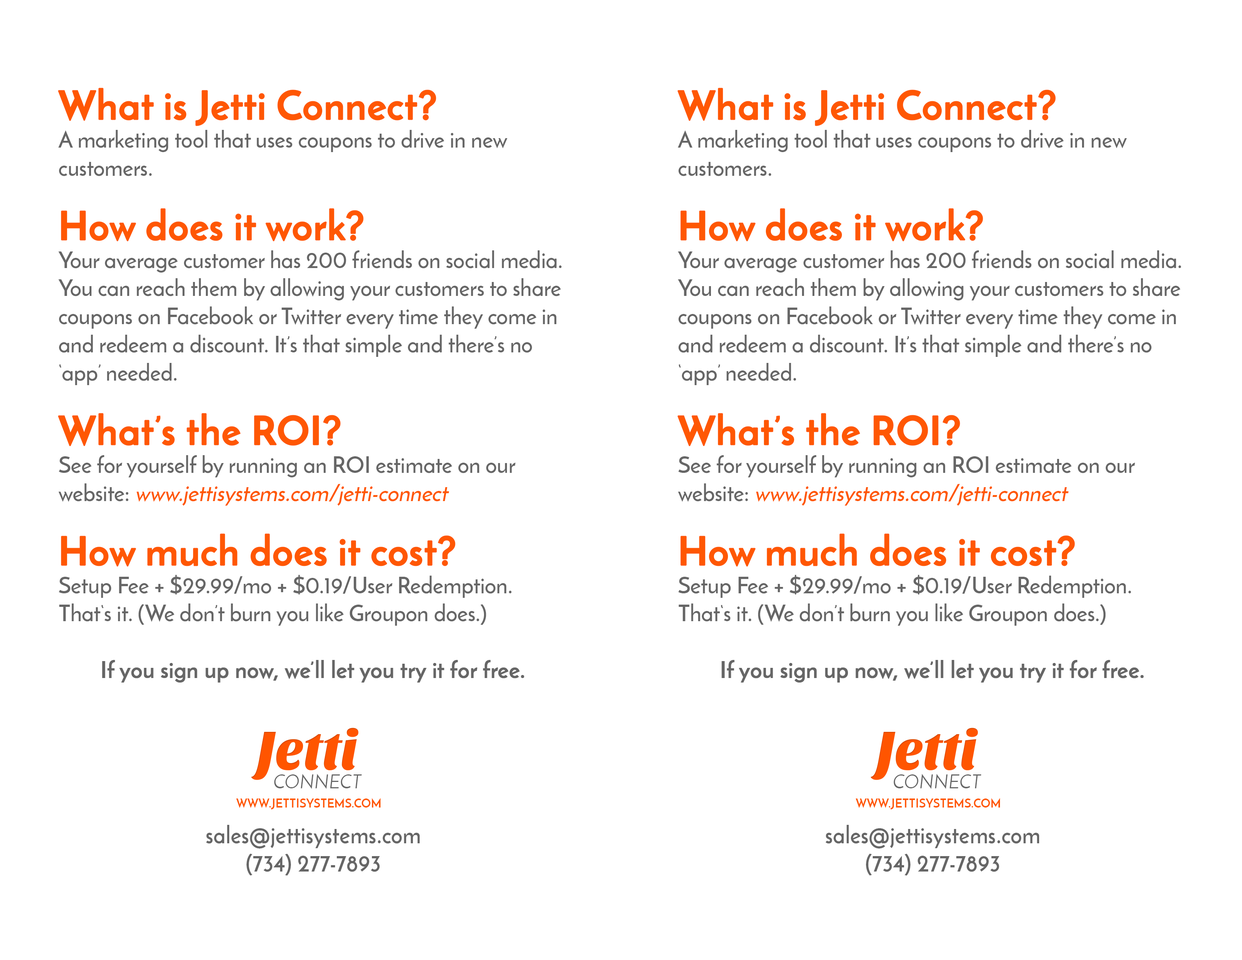
<style>
.page{position:relative;width:1242px;height:960px;background:#ffffff}
.page>*{position:absolute;margin:0}
.t1{font:22.5px/28.1px "JosefinSans-SemiBold";color:#666666}
.t2{font:39.4px "JosefinSans-Bold";color:#ff5703;font-weight:bold}
.t3{font:22.5px/28.1px "JosefinSans-SemiBold";color:#ff5703;font-style:italic}
.t4{font:22.5px/28.1px "JosefinSans-SemiBold";color:#666666;font-weight:bold}
.t5{font:56.4px "SansitaOne";letter-spacing:-0.01em;color:#ff5500;scale:0.95 1}
.t6{font:19.1px "JosefinSans";letter-spacing:0.01em;color:#666666;text-transform:uppercase;scale:0.94 1}
.t7{font:12.3px "JosefinSans-Bold";letter-spacing:0.01em;color:#ff5703;text-transform:uppercase;scale:0.94 1}
.t8{font:23.6px/28.2px "JosefinSans-Bold";letter-spacing:0.01em;color:#666666;scale:0.94 1}
</style>
<div class="page">
<p class="t1" style="left:58px;top:88px;width:504px;height:594px"><span class="t2">What is Jetti Connect?<br></span>A marketing tool that uses coupons to drive in new customers.<br><br><span class="t2">How does it work?<br></span>Your average customer has 200 friends on social media. You can reach them by allowing your customers to share coupons on Facebook or Twitter every time they come in and redeem a discount. It’s that simple and there’s no ‘app’ needed.<br><br><span class="t2">What’s the ROI?<br></span>See for yourself by running an ROI estimate on our website: <span class="t3">www.jettisystems.com/jetti-connect<br><br></span><span class="t2">How much does it cost?<br></span>Setup Fee + $29.99/mo + $0.19/User Redemption. That‘s it. (We don’t burn you like Groupon does.)<br><br><span class="t4">If you sign up now, we’ll let you try it for free.</span></p>
<p class="t1" style="left:678px;top:88px;width:503px;height:594px"><span class="t2">What is Jetti Connect?<br></span>A marketing tool that uses coupons to drive in new customers.<br><br><span class="t2">How does it work?<br></span>Your average customer has 200 friends on social media. You can reach them by allowing your customers to share coupons on Facebook or Twitter every time they come in and redeem a discount. It’s that simple and there’s no ‘app’ needed.<br><br><span class="t2">What’s the ROI?<br></span>See for yourself by running an ROI estimate on our website: <span class="t3">www.jettisystems.com/jetti-connect<br><br></span><span class="t2">How much does it cost?<br></span>Setup Fee + $29.99/mo + $0.19/User Redemption. That‘s it. (We don’t burn you like Groupon does.)<br><br><span class="t4">If you sign up now, we’ll let you try it for free.</span></p>
<p class="t5" style="left:251px;top:728px;width:108px;height:52px">Jetti</p>
<p class="t5" style="left:871px;top:728px;width:107px;height:52px">Jetti</p>
<p class="t6" style="left:274px;top:774px;width:88px;height:15px">CONNECT</p>
<p class="t6" style="left:894px;top:774px;width:88px;height:15px">CONNECT</p>
<p class="t7" style="left:236px;top:798px;width:145px;height:11px">www.jeTtisystems.com</p>
<p class="t7" style="left:856px;top:798px;width:144px;height:11px">www.jeTtisystems.com</p>
<p class="t8" style="left:206px;top:825px;width:214px;height:51px;text-align:center">sales@jettisystems.com<br>(734) 277-7893</p>
<p class="t8" style="left:826px;top:825px;width:213px;height:51px;text-align:center">sales@jettisystems.com<br>(734) 277-7893</p>
</div>
